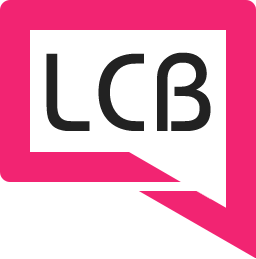
<style>
.page{position:relative;width:256px;height:259px;background:#ffffff}
.page>*{position:absolute;margin:0}
.t1{font:110.4px "Baumans-Regular";color:#222222}
</style>
<div class="page">
<p class="t1" style="left:46px;top:52px;width:165px;height:79px">LCB</p>
</div>
